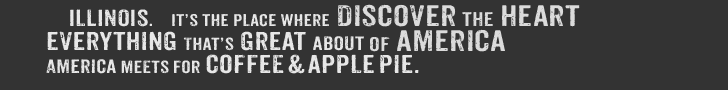
<style>
.page{position:relative;width:728px;height:90px;background:#333333}
.page>*{position:absolute;margin:0}
.t1{font:28.8px/24.9px "Anodyne";color:#dbdbdb;scale:1.26 1}
.t2{font:19.7px/24.9px "Anodyne";color:#dbdbdb;scale:1.26 1}
.t3{font:19.2px/24.9px "Anodyne";color:#dbdbdb;scale:1.26 1}
.t4{font:25.1px/23.4px "Anodyne";color:#ffffff;scale:1.24 1}
.t5{font:18.1px/9.9px "Anodyne";color:#ffffff;scale:1.24 1}
.t6{font:22.6px/11.1px "Anodyne";color:#ffffff;scale:1.24 1}
.t7{font:18.1px/11.1px "Anodyne";color:#ffffff;scale:1.24 1}
.t8{font:16.4px/11.1px "Anodyne";color:#ffffff;scale:1.24 1}
.t9{font:16.4px/19.4px "Anodyne";color:#ffffff;scale:1.24 1}
.t10{font:17.1px/23.4px "Anodyne";color:#ffffff;scale:1.24 1}
.t11{font:18.8px/23.4px "Anodyne";color:#ffffff;scale:1.24 1}
</style>
<div class="page">
<p class="t1" style="left:338px;top:4px;width:242px;height:48px"><span class="t2">       </span>Discover<span class="t3"> the </span>heart<br><span class="t3">              of </span>america</p>
<p class="t4" style="left:46px;top:9px;width:373px;height:65px;opacity:0.88"><span class="t5">     </span><span class="t6">ILLINOIS</span><span class="t7">.    </span><span class="t8">It’s </span><span class="t9">the place where<br></span>everything <span class="t10">That’s</span> great <span class="t11">about<br>America </span><span class="t10">meets for </span>coffee &amp; apple Pie.</p>
</div>
